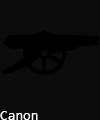
<style>
.page{position:relative;width:100px;height:120px;background:#0b0b0b}
.page>*{position:absolute;margin:0}
.t1{font:14px "Consolas";color:#ffffff}
</style>
<div class="page">
<p class="t1" style="left:0px;top:111px;width:38px;height:9px">Canon</p>
</div>
